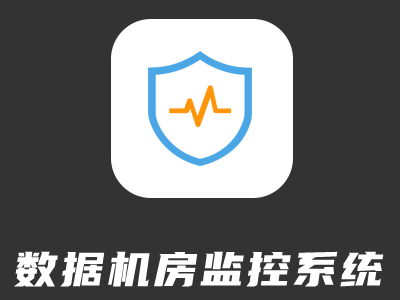
<style>
.page{position:relative;width:400px;height:300px;background:#333333}
.page>*{position:absolute;margin:0}
.t1{font:48px "YouSheBiaoTiHei";letter-spacing:0.05em;color:#ffffff}
</style>
<div class="page">
<p class="t1" style="left:14px;top:251px;width:370px;height:36px">数据机房监控系统</p>
</div>
